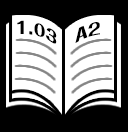
<style>
.page{position:relative;width:128px;height:132px;background:#000000}
.page>*{position:absolute;margin:0}
.t1{font:16px "FolkPro-Heavy";color:#000000}
</style>
<div class="page">
<p class="t1" style="left:17px;top:20px;width:40px;height:24px">1.03</p>
<p class="t1" style="left:75px;top:22px;width:25px;height:21px">A2</p>
</div>
